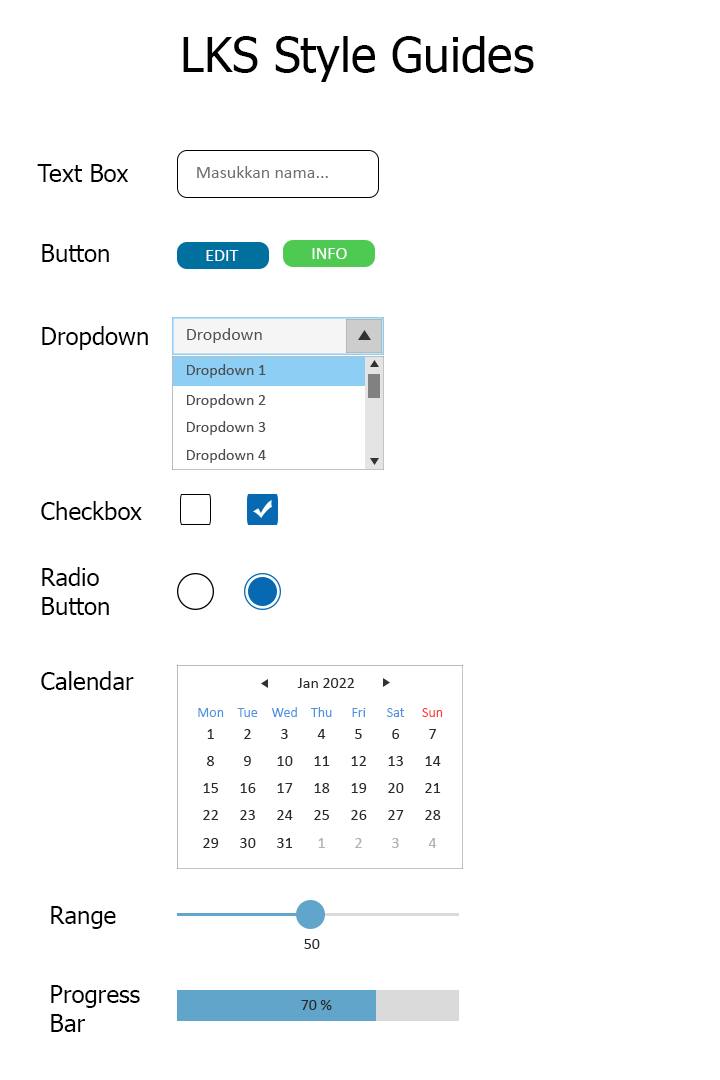
<style>
.page{position:relative;width:720px;height:1080px;background:#ffffff}
.page>*{position:absolute;margin:0}
.t1{font:48px "Tahoma";color:#000000}
.t2{font:24px "Tahoma";color:#000000}
.t3{font:18px "Calibri";color:#6e6e6e}
.t4{font:18px "Calibri";color:#ffffff}
.t5{font:18px "Calibri";color:#4e4e4e}
.t6{font:16px "Calibri";color:#4e4e4e}
.t7{font:16px "Calibri";color:#2b2b2b}
.t8{font:14px/14px "Calibri";color:#4e92df}
.t9{font:16px/14px "Calibri";color:#2b2b2b}
.t10{font:16px "Calibri";color:#b1b1b1}
.t11{font:14px/14px "Calibri";color:#ff3838}
</style>
<div class="page">
<p class="t1" style="left:183px;top:36px;width:351px;height:46px">LKS Style Guides</p>
<p class="t2" style="left:37px;top:164px;width:92px;height:18px">Text Box</p>
<p class="t3" style="left:197px;top:166px;width:131px;height:12px">Masukkan nama...</p>
<p class="t2" style="left:42px;top:244px;width:67px;height:18px">Button</p>
<p class="t4" style="left:206px;top:250px;width:33px;height:11px">EDIT</p>
<p class="t4" style="left:312px;top:248px;width:35px;height:11px">INFO</p>
<p class="t2" style="left:42px;top:326px;width:106px;height:24px">Dropdown</p>
<p class="t5" style="left:187px;top:328px;width:75px;height:15px">Dropdown</p>
<p class="t6" style="left:187px;top:364px;width:79px;height:14px">Dropdown 1</p>
<p class="t6" style="left:187px;top:394px;width:79px;height:14px">Dropdown 2</p>
<p class="t6" style="left:187px;top:421px;width:79px;height:14px">Dropdown 3</p>
<p class="t6" style="left:187px;top:449px;width:79px;height:14px">Dropdown 4</p>
<p class="t2" style="left:41px;top:501px;width:101px;height:19px">Checkbox</p>
<p class="t2" style="left:42px;top:567px;width:67px;height:48px">Radio<br>Button</p>
<p class="t2" style="left:41px;top:671px;width:93px;height:19px">Calendar</p>
<p class="t7" style="left:297px;top:678px;width:57px;height:10px">Jan 2022</p>
<p class="t7" style="left:198px;top:708px;width:26px;height:140px;text-align:center"><span class="t8">Mon<br></span><span class="t9">1<br></span>8<br>15<br>22<br>29</p>
<p class="t7" style="left:237px;top:708px;width:21px;height:140px;text-align:center"><span class="t8">Tue<br></span><span class="t9">2<br></span>9<br>16<br>23<br>30</p>
<p class="t7" style="left:271px;top:707px;width:26px;height:141px;text-align:center"><span class="t8">Wed<br></span><span class="t9">3<br></span>10<br>17<br>24<br>31</p>
<p class="t7" style="left:311px;top:707px;width:21px;height:141px;text-align:center"><span class="t8">Thu<br></span><span class="t9">4<br></span>11<br>18<br>25<br><span class="t10">1</span></p>
<p class="t7" style="left:351px;top:708px;width:16px;height:140px;text-align:center"><span class="t8">Fri<br></span><span class="t9">5<br></span>12<br>19<br>26<br><span class="t10">2</span></p>
<p class="t7" style="left:387px;top:708px;width:18px;height:140px;text-align:center"><span class="t8">Sat<br></span><span class="t9">6<br></span>13<br>20<br>27<br><span class="t10">3</span></p>
<p class="t7" style="left:422px;top:708px;width:21px;height:140px;text-align:center"><span class="t11">Sun<br></span><span class="t9">7<br></span>14<br>21<br>28<br><span class="t10">4</span></p>
<p class="t2" style="left:51px;top:906px;width:65px;height:23px">Range</p>
<p class="t7" style="left:304px;top:939px;width:16px;height:10px">50</p>
<p class="t2" style="left:51px;top:985px;width:89px;height:47px">Progress<br>Bar</p>
<p class="t7" style="left:301px;top:1000px;width:31px;height:10px">70 %</p>
</div>
